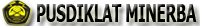
<style>
.page{position:relative;width:200px;height:26px}
.page>*{position:absolute;margin:0}
.t1{font:24.1px "Tahoma-Bold";color:#000000;scale:0.6 1}
</style>
<div class="page">
<p class="t1" style="left:37px;top:4px;width:160px;height:18px">PUSDIKLAT MINERBA</p>
</div>
